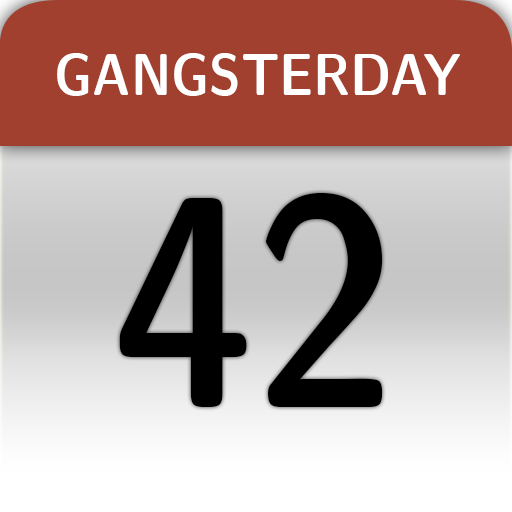
<style>
.page{position:relative;width:512px;height:512px;background:#a24030}
.page>*{position:absolute;margin:0}
.t1{font:60px "CMUSansSerif-DemiCondensed";color:#ffffff}
.t2{font:300px "CMUSansSerif-DemiCondensed";color:#000000}
</style>
<div class="page">
<p class="t1" style="left:57px;top:53px;width:403px;height:43px">GANGSTERDAY</p>
<p class="t2" style="left:119px;top:193px;width:264px;height:214px">42</p>
</div>
